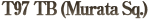
<style>
.page{position:relative;width:156px;height:19px;background:#ffffff}
.page>*{position:absolute;margin:0}
.t1{font:18px "RyuminPro-ExBold";letter-spacing:-0.08em;color:#4a3f32;font-weight:bold;scale:0.9 1}
</style>
<div class="page">
<p class="t1" style="left:1px;top:1px;width:147px;height:18px">T97 TB (Murata Sq.)</p>
</div>
